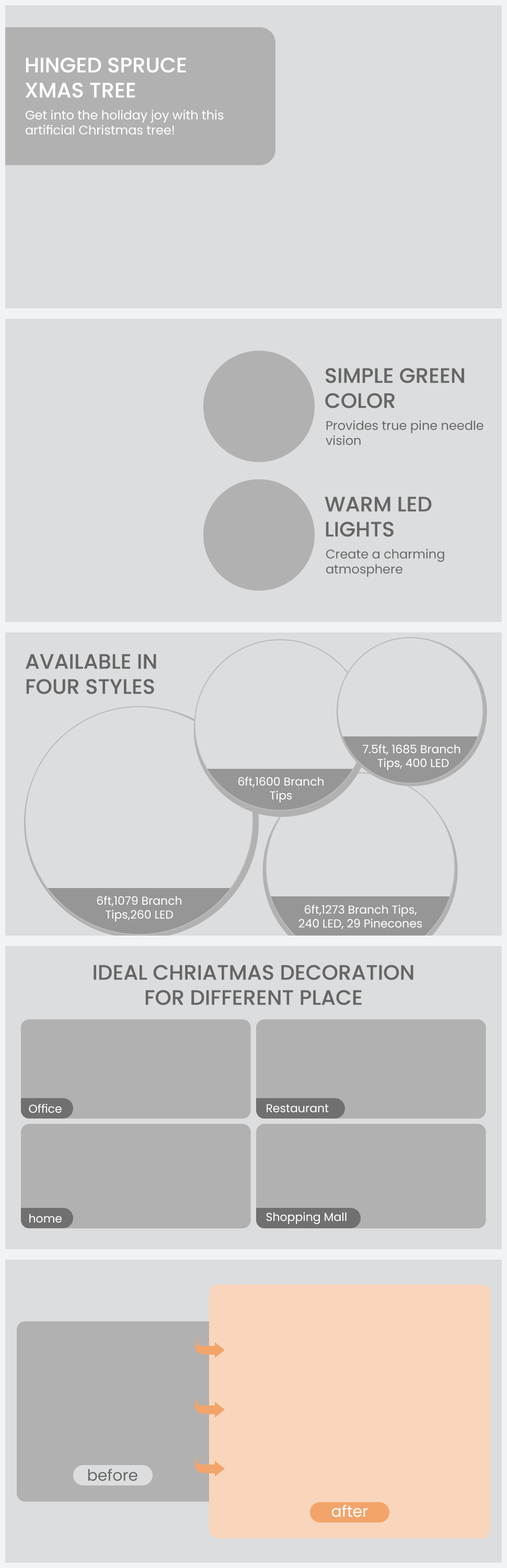
<style>
.page{position:relative;width:507px;height:1568px;background:#dcdddf}
.page>*{position:absolute;margin:0}
.t1{font:20.9px "Poppins-Medium";color:#ffffff}
.t2{font:12.5px "Poppins-Regular";color:#ffffff}
.t3{font:20.9px "Poppins-Medium";color:#666666}
.t4{font:12.5px "Poppins-Regular";color:#666666}
.t5{font:11.5px "Poppins-Regular";color:#ffffff}
.t6{font:15.7px "Poppins-Regular";color:#666666}
.t7{font:15.7px "Poppins-Regular";color:#ffffff}
</style>
<div class="page">
<p class="t1" style="left:25px;top:57px;width:161px;height:41px">HINGED SPRUCE<br>XMAS TREE</p>
<p class="t2" style="left:26px;top:110px;width:198px;height:25px">Get into the holiday joy with this<br>artificial Christmas tree!</p>
<p class="t3" style="left:325px;top:368px;width:139px;height:40px">SIMPLE GREEN<br>COLOR</p>
<p class="t4" style="left:326px;top:420px;width:157px;height:25px">Provides true pine needle<br>vision</p>
<p class="t3" style="left:325px;top:497px;width:107px;height:40px">WARM LED<br>LIGHTS</p>
<p class="t4" style="left:326px;top:549px;width:118px;height:28px">Create a charming<br>atmosphere</p>
<p class="t3" style="left:26px;top:654px;width:130px;height:40px">AVAILABLE IN<br>FOUR STYLES</p>
<p class="t5" style="left:363px;top:744px;width:97px;height:26px;text-align:center">7.5ft, 1685 Branch <br>Tips, 400 LED</p>
<p class="t5" style="left:238px;top:777px;width:86px;height:26px;text-align:center">6ft,1600 Branch<br>Tips</p>
<p class="t5" style="left:97px;top:896px;width:84px;height:26px;text-align:center">6ft,1079 Branch<br>Tips,260 LED</p>
<p class="t5" style="left:298px;top:905px;width:124px;height:24px;text-align:center">6ft,1273 Branch Tips,<br>240 LED, 29 Pinecones</p>
<p class="t3" style="left:94px;top:965px;width:319px;height:40px;text-align:center">IDEAL CHRIATMAS DECORATION<br>FOR DIFFERENT PLACE</p>
<p class="t5" style="left:29px;top:1104px;width:33px;height:9px">Office</p>
<p class="t5" style="left:267px;top:1104px;width:62px;height:9px">Restaurant</p>
<p class="t5" style="left:29px;top:1214px;width:33px;height:9px">home</p>
<p class="t5" style="left:266px;top:1212px;width:81px;height:12px">Shopping Mall</p>
<p class="t6" style="left:88px;top:1469px;width:49px;height:12px">before</p>
<p class="t7" style="left:331px;top:1505px;width:37px;height:12px">after</p>
</div>
